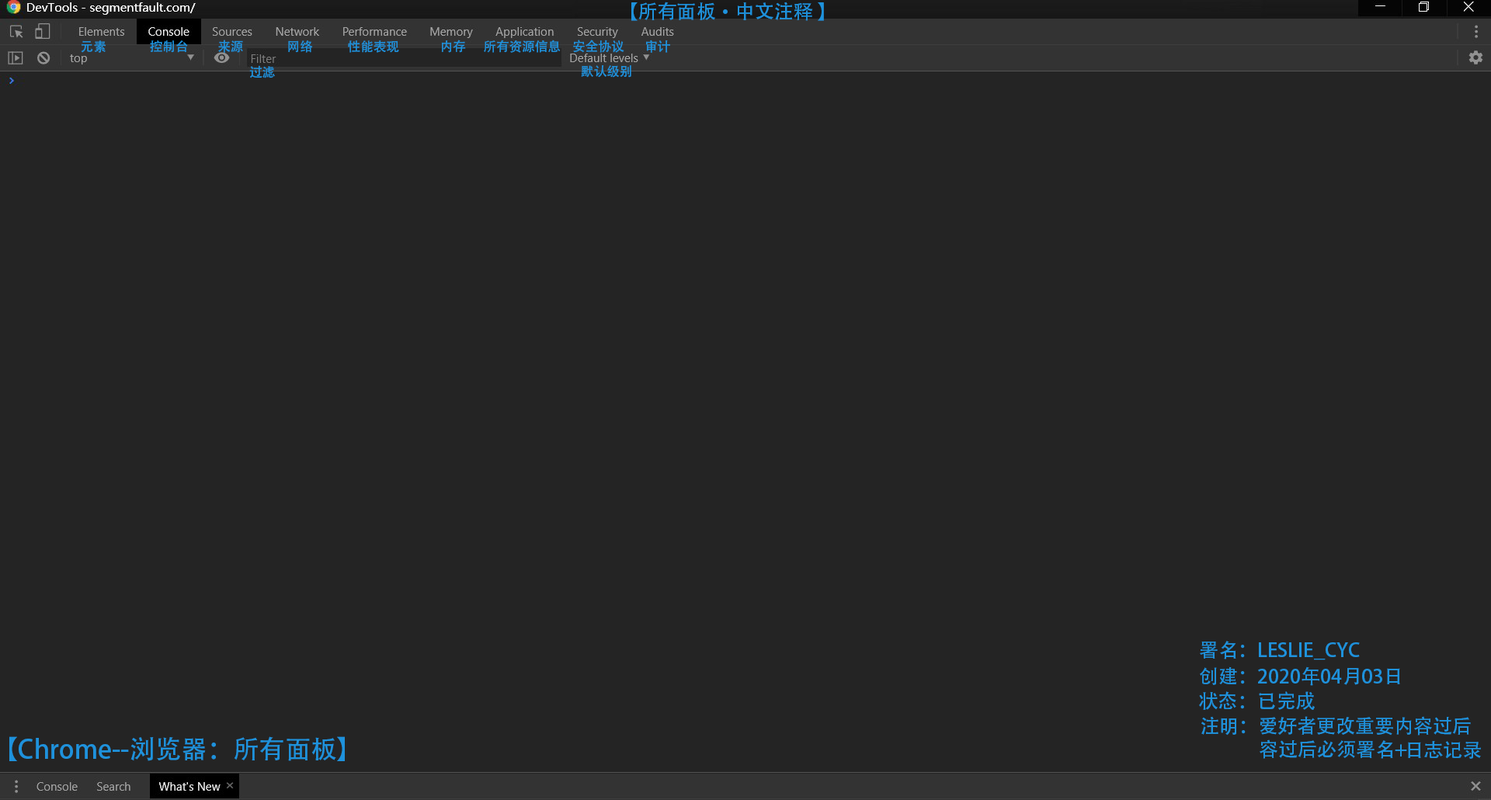
<style>
.page{position:relative;width:1491px;height:800px;background:#242424}
.page>*{position:absolute;margin:0}
.t1{font:19.4px "AdobeHeitiStd-Regular";color:#1e92dc}
.t2{font:12.9px "AdobeHeitiStd-Regular";color:#1e92dc}
.t3{font:25.9px "AdobeHeitiStd-Regular";color:#1e92dc}
</style>
<div class="page">
<p class="t1" style="left:631px;top:2px;width:193px;height:19px">【所有面板•中文注释 】</p>
<p class="t2" style="left:81px;top:40px;width:589px;height:13px">元素               控制台          来源               网络            性能表现              内存      所有资源信息    安全协议       审计</p>
<p class="t2" style="left:249px;top:65px;width:26px;height:13px">过滤</p>
<p class="t2" style="left:581px;top:65px;width:50px;height:13px">默认级别</p>
<p class="t1" style="left:1200px;top:641px;width:160px;height:19px">署名：LESLIE_CYC</p>
<p class="t1" style="left:1200px;top:666px;width:200px;height:20px">创建：2020年04月03日</p>
<p class="t1" style="left:1199px;top:691px;width:116px;height:19px">状态：已完成</p>
<p class="t1" style="left:1201px;top:716px;width:270px;height:19px">注明：爱好者更改重要内容过后</p>
<p class="t3" style="left:9px;top:736px;width:336px;height:25px">【Chrome--浏览器：所有面板】</p>
<p class="t1" style="left:1260px;top:739px;width:147px;height:20px">容过后必须署名+</p>
<p class="t1" style="left:1408px;top:741px;width:73px;height:18px">日志记录</p>
</div>
